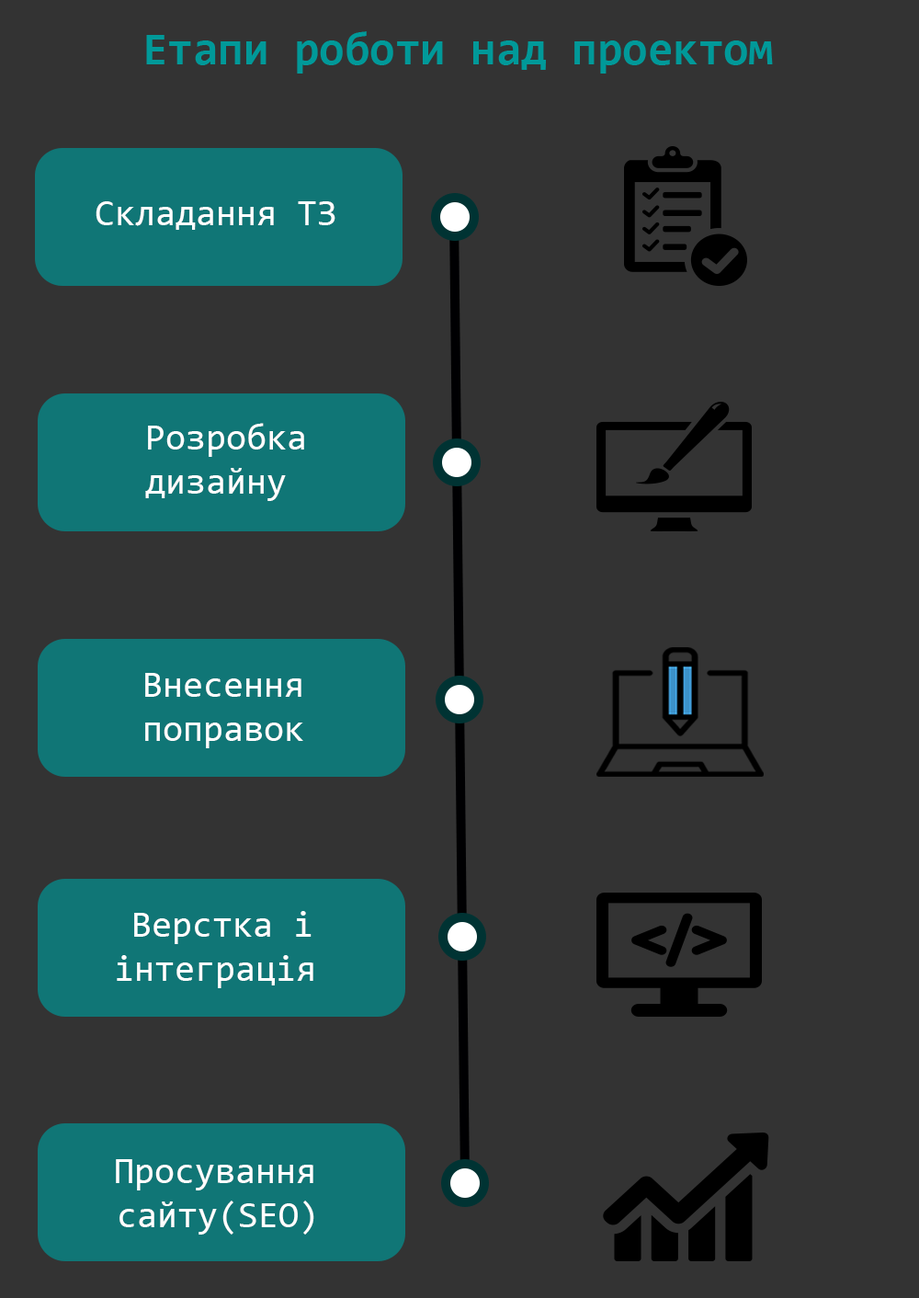
<style>
.page{position:relative;width:919px;height:1298px;background:#333333}
.page>*{position:absolute;margin:0}
.t1{font:45.9px "Consolas-Bold";color:#009999}
.t2{font:36.8px "Consolas";color:#ffffff}
.t3{font:45.9px "MinionPro-BoldCn";color:#ffffff}
</style>
<div class="page">
<p class="t1" style="left:146px;top:31px;width:627px;height:43px">Етапи роботи над проектом</p>
<p class="t2" style="left:96px;top:201px;width:239px;height:29px">Складання ТЗ</p>
<p class="t2" style="left:145px;top:423px;width:159px;height:78px">Розробка <br>дизайну</p>
<p class="t2" style="left:145px;top:673px;width:158px;height:75px">Внесення <br>поправок</p>
<p class="t2" style="left:117px;top:911px;width:196px;height:77px"><span class="t3">  </span>Верстка і<br>інтеграція</p>
<p class="t2" style="left:116px;top:1159px;width:198px;height:75px"><span class="t3">  </span>Просування <br> сайту(SEO)</p>
</div>
